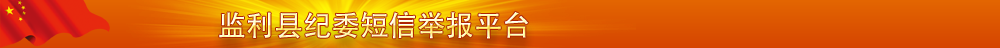
<style>
.page{position:relative;width:1000px;height:48px}
.page>*{position:absolute;margin:0}
.t1{font:28.5px "AdobeHeitiStd-Regular"}
</style>
<div class="page">
<p class="t1" style="left:219px;top:11px;width:310px;height:28px">监利县纪委短信举报平台</p>
</div>
